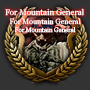
<style>
.page{position:relative;width:90px;height:90px;background:#333333}
.page>*{position:absolute;margin:0}
.t1{font:8px "Georgia";color:#ffffff}
.t2{font:7.2px "Georgia";color:#ffffff}
.t3{font:6.1px "Georgia";color:#ffffff}
</style>
<div class="page">
<p class="t1" style="left:5px;top:8px;width:79px;height:8px">For Mountain General</p>
<p class="t2" style="left:9px;top:18px;width:72px;height:7px">For Mountain General</p>
<p class="t3" style="left:14px;top:27px;width:62px;height:6px">For Mountain General</p>
</div>
